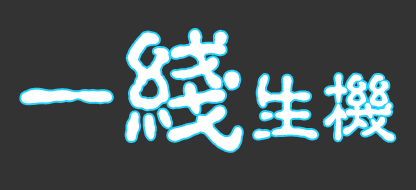
<style>
.page{position:relative;width:416px;height:190px;background:#333333}
.page>*{position:absolute;margin:0}
.t1{font:77.3px "TankuinEG-Bold-T-GB";color:#ffffff}
.t2{font:107.3px "TankuinEG-Bold-T-GB";color:#ffffff}
.t3{font:133.1px "TankuinEG-Bold-T-GB";color:#ffffff}
</style>
<div class="page">
<p class="t1" style="left:21px;top:30px;width:374px;height:121px"><span class="t2">一</span><span class="t3">线</span>生机</p>
</div>
